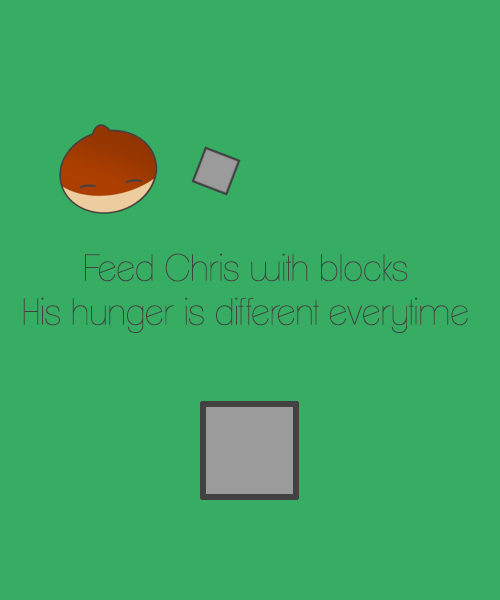
<style>
.page{position:relative;width:500px;height:600px;background:#37ac63}
.page>*{position:absolute;margin:0}
.t1{font:36.7px "ClementePDaa-Hairline";color:#424242}
</style>
<div class="page">
<p class="t1" style="left:23px;top:253px;width:445px;height:80px;text-align:center">Feed Chris with blocks<br>His hunger is different everytime</p>
</div>
